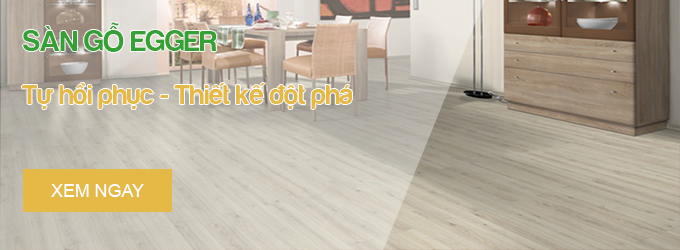
<style>
.page{position:relative;width:680px;height:250px}
.page>*{position:absolute;margin:0}
.t1{font:30px "FS-Harabara";color:#35a135}
.t2{font:28px "FS-Harabara";color:#e5b946}
.t3{font:17.8px "ArialMT";color:#ffffff}
</style>
<div class="page">
<p class="t1" style="left:23px;top:22px;width:194px;height:30px">SÀN GỖ EGGER</p>
<p class="t2" style="left:22px;top:83px;width:330px;height:26px">Tự hồi phục - Thiết kế đột phá</p>
<p class="t3" style="left:51px;top:184px;width:93px;height:13px">XEM NGAY</p>
</div>
